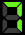
<style>
.page{position:relative;width:25px;height:35px;background:#000000}
.page>*{position:absolute;margin:0}
.t1{font:48px "DS-Digital-Bold";color:#67f31b}
</style>
<div class="page">
<p class="t1" style="left:3px;top:2px;width:19px;height:30px">7</p>
</div>
